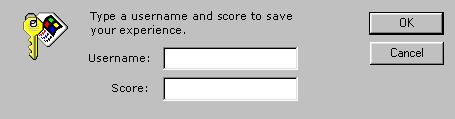
<style>
.page{position:relative;width:455px;height:119px;background:#c0c0c0}
.page>*{position:absolute;margin:0}
.t1{font:11.4px "MSReferenceSansSerif";letter-spacing:-0.005em;color:#000000}
.t2{font:11.4px "MSReferenceSansSerif";color:#000000}
</style>
<div class="page">
<p class="t1" style="left:90px;top:11px;width:202px;height:25px">Type a username and score to save <br>your experience.</p>
<p class="t2" style="left:89px;top:54px;width:60px;height:8px">Username:</p>
<p class="t2" style="left:112px;top:84px;width:35px;height:8px">Score:</p>
</div>
